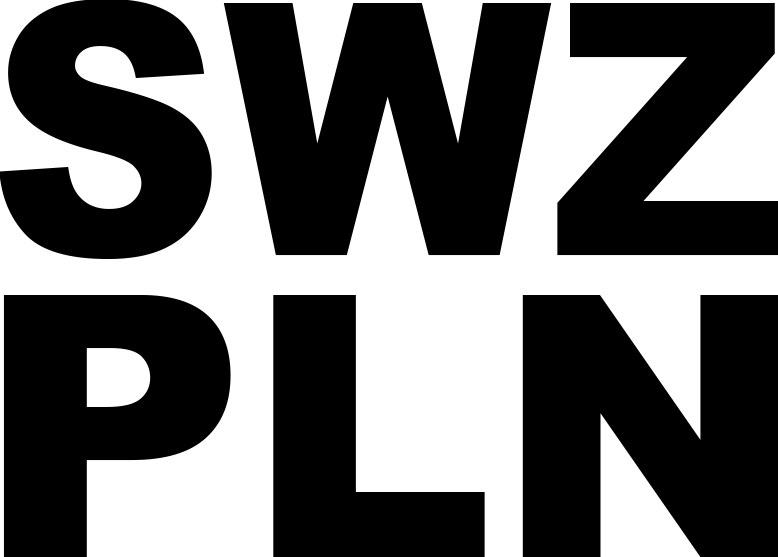
<style>
.page{position:relative;width:778px;height:557px;background:#000000}
.page>*{position:absolute;margin:0}
.t1{font:352.4px "Arial-Black";color:#000000;scale:0.93 1}
.t2{font:365.6px "Arial-Black";color:#000000}
</style>
<div class="page">
<p class="t1" style="left:0px;top:0px;width:780px;height:259px">SWZ</p>
<p class="t2" style="left:3px;top:295px;width:776px;height:262px">PLN</p>
</div>
